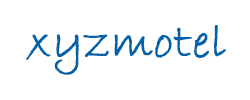
<style>
.page{position:relative;width:250px;height:100px;background:#ffffff}
.page>*{position:absolute;margin:0}
.t1{font:48px "BradleyHandITC";color:#0062a9;font-weight:bold}
</style>
<div class="page">
<p class="t1" style="left:26px;top:25px;width:200px;height:50px">xyzmotel</p>
</div>
